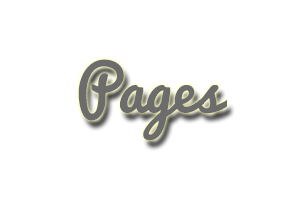
<style>
.page{position:relative;width:300px;height:200px;background:#ffffff}
.page>*{position:absolute;margin:0}
.t1{font:60px "Pacifico-Regular";color:#6c6c6c}
</style>
<div class="page">
<p class="t1" style="left:78px;top:59px;width:149px;height:82px">Pages</p>
</div>
